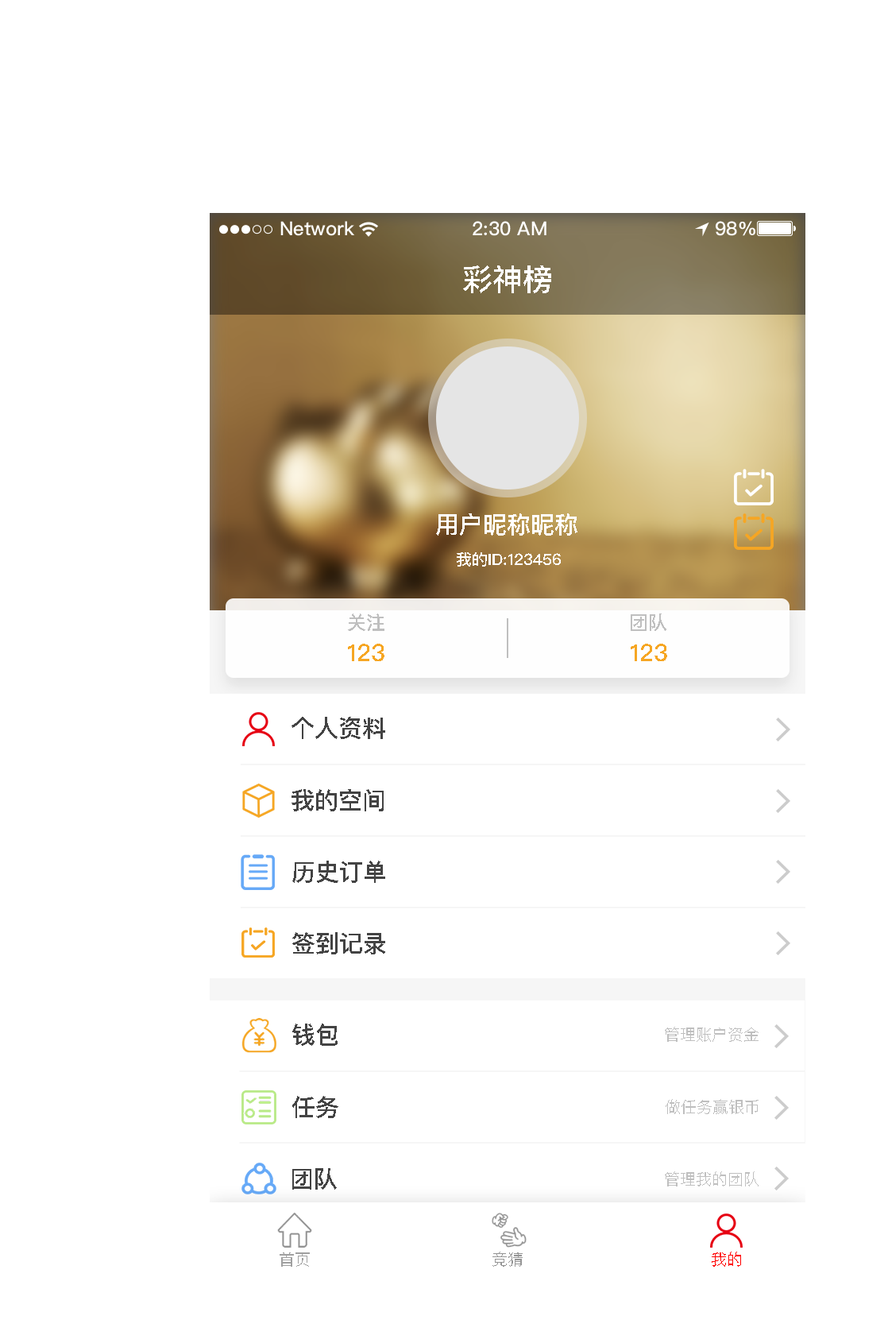
<style>
.page{position:relative;width:888px;height:1343px;background:#ffffff}
.page>*{position:absolute;margin:0}
.t1{font:30.2px "PingFangSC-Medium";color:#ffffff;text-transform:uppercase}
.t2{font:23.8px "PingFangSC-Medium";color:#ffffff;text-transform:uppercase}
.t3{font:15.9px "PingFangSC-Medium";color:#ffffff;text-transform:uppercase}
.t4{font:19.1px "PingFangSC-Medium";color:#bfbfbf;text-transform:uppercase}
.t5{font:23.8px "PingFangSC-Medium";color:#f6a623;text-transform:uppercase}
.t6{font:23.8px "PingFangSC-Medium";color:#434343;text-transform:uppercase}
.t7{font:15.9px "PingFangSC-Regular";color:#bfbfbf;text-transform:uppercase}
.t8{font:15.9px "PingFangSC-Regular";color:#a0a0a0;text-transform:uppercase}
.t9{font:15.9px "PingFangSC-Regular";color:#959595;text-transform:uppercase}
.t10{font:15.9px "PingFangSC-Regular";color:#ff0000;text-transform:uppercase}
</style>
<div class="page">
<p class="t1" style="left:463px;top:265px;width:88px;height:28px">彩神榜</p>
<p class="t2" style="left:436px;top:513px;width:142px;height:22px">用户昵称昵称</p>
<p class="t3" style="left:457px;top:552px;width:104px;height:14px">我的id:123456</p>
<p class="t4" style="left:348px;top:613px;width:37px;height:18px">关注</p>
<p class="t4" style="left:631px;top:613px;width:36px;height:18px">团队</p>
<p class="t5" style="left:348px;top:643px;width:37px;height:18px">123</p>
<p class="t5" style="left:631px;top:643px;width:36px;height:18px">123</p>
<p class="t6" style="left:292px;top:717px;width:93px;height:22px">个人资料</p>
<p class="t6" style="left:292px;top:789px;width:92px;height:22px">我的空间</p>
<p class="t6" style="left:292px;top:860px;width:93px;height:23px">历史订单</p>
<p class="t6" style="left:292px;top:932px;width:93px;height:22px">签到记录</p>
<p class="t6" style="left:292px;top:1023px;width:46px;height:22px">钱包</p>
<p class="t7" style="left:665px;top:1026px;width:94px;height:15px">管理账户资金</p>
<p class="t6" style="left:292px;top:1096px;width:46px;height:22px">任务</p>
<p class="t7" style="left:666px;top:1099px;width:93px;height:15px">做任务赢银币</p>
<p class="t6" style="left:292px;top:1168px;width:45px;height:21px">团队</p>
<p class="t7" style="left:665px;top:1171px;width:94px;height:15px">管理我的团队</p>
<p class="t8" style="left:280px;top:1252px;width:30px;height:14px">首页</p>
<p class="t9" style="left:493px;top:1251px;width:30px;height:15px">竞猜</p>
<p class="t10" style="left:712px;top:1251px;width:29px;height:15px">我的</p>
</div>
